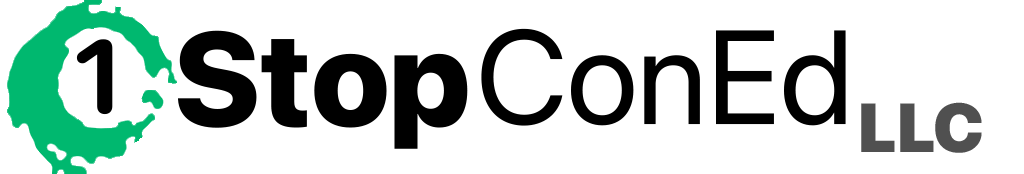
<style>
.page{position:relative;width:1024px;height:174px;background:#ffffff}
.page>*{position:absolute;margin:0}
.t1{font:132.8px "SFProDisplay-Heavy";color:#000000}
.t2{font:132.8px "SFProDisplay-Regular";color:#000000}
.t3{font:103px "SFProRounded-Bold";color:#000000}
.t4{font:68.7px "SFProDisplay-Black";color:#505050}
</style>
<div class="page">
<p class="t1" style="left:178px;top:30px;width:290px;height:119px">Stop</p>
<p class="t2" style="left:481px;top:28px;width:365px;height:98px">ConEd</p>
<p class="t3" style="left:76px;top:39px;width:37px;height:76px">1</p>
<p class="t4" style="left:861px;top:102px;width:121px;height:51px">LLC</p>
</div>
